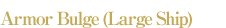
<style>
.page{position:relative;width:226px;height:28px;background:#ffffff}
.page>*{position:absolute;margin:0}
.t1{font:18px "RyuminPro-ExBold";letter-spacing:-0.08em;color:#c4a956}
</style>
<div class="page">
<p class="t1" style="left:0px;top:11px;width:192px;height:17px">Armor Bulge (Large Ship)</p>
</div>
